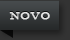
<style>
.page{position:relative;width:70px;height:40px}
.page>*{position:absolute;margin:0}
.t1{font:10.1px "TimesNewRomanPSMT";letter-spacing:0.025em;color:#e2e2e2;font-weight:bold;scale:1.29 1}
</style>
<div class="page">
<p class="t1" style="left:9px;top:12px;width:41px;height:8px">NOVO</p>
</div>
